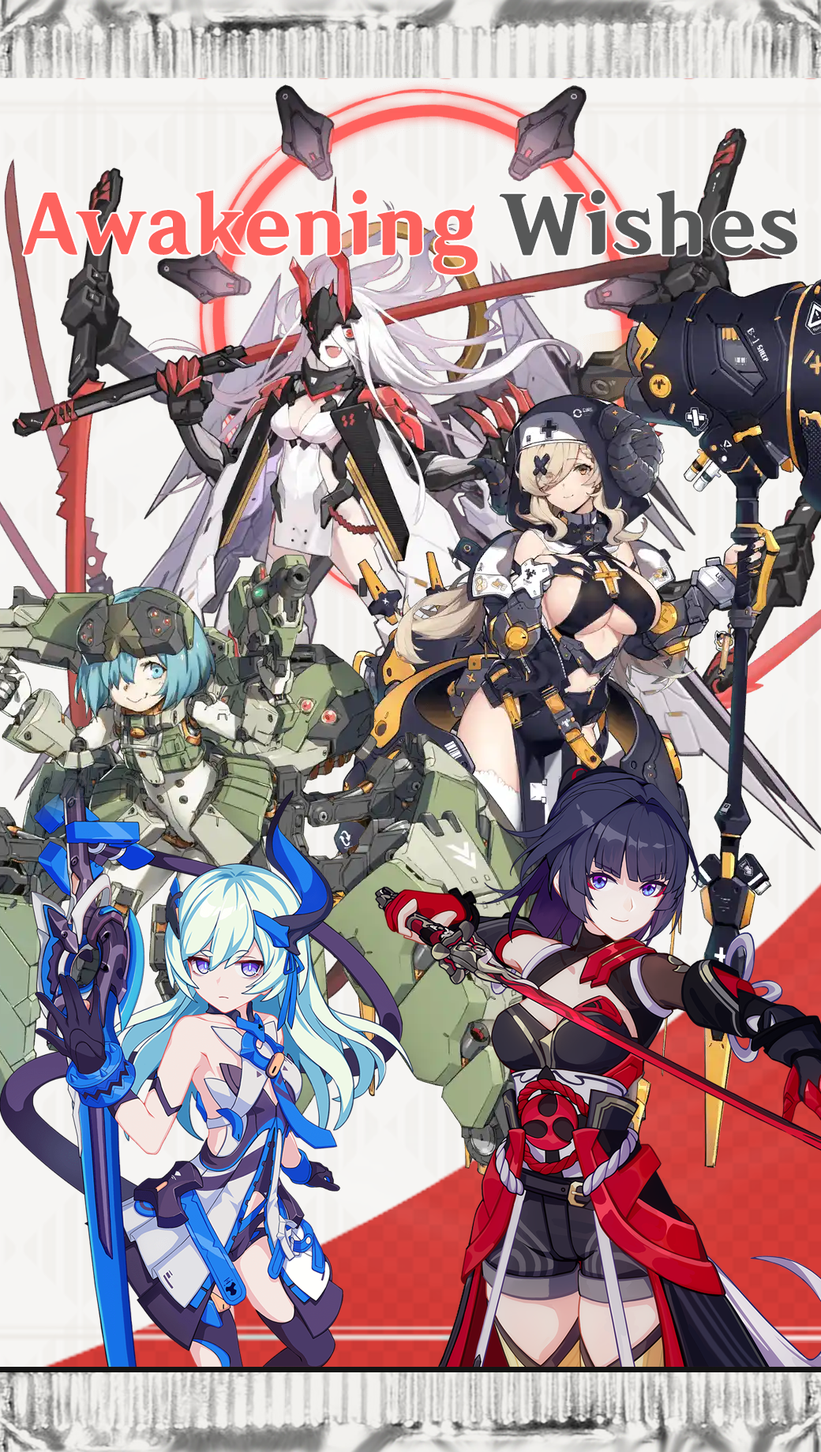
<style>
.page{position:relative;width:821px;height:1452px}
.page>*{position:absolute;margin:0}
.t1{font:78.7px "Default_SC-85W";letter-spacing:-0.005em;color:#fd635e}
.t2{font:78.7px "Default_SC-85W";letter-spacing:-0.005em;color:#575858}
</style>
<div class="page">
<p class="t1" style="left:23px;top:189px;width:774px;height:86px">Awakening <span class="t2">Wishes</span></p>
</div>
